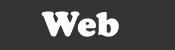
<style>
.page{position:relative;width:175px;height:50px;background:#333333}
.page>*{position:absolute;margin:0}
.t1{font:36px "CooperBlack";color:#fefefe}
</style>
<div class="page">
<p class="t1" style="left:41px;top:11px;width:78px;height:26px">Web</p>
</div>
